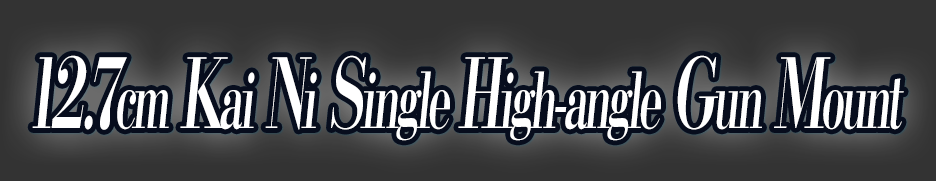
<style>
.page{position:relative;width:936px;height:181px;background:#333333}
.page>*{position:absolute;margin:0}
.t1{font:76.8px "KochoStd-Heavy";letter-spacing:-0.08em;color:#ffffff;font-style:italic;scale:0.57 1}
.t2{font:96px "KochoStd-Heavy";letter-spacing:-0.08em;color:#ffffff;font-style:italic;scale:0.57 1}
</style>
<div class="page">
<p class="t1" style="left:32px;top:55px;width:872px;height:86px"><span class="t2">12.7</span>cm<span class="t2"> K</span>ai<span class="t2"> N</span>i<span class="t2"> S</span>ingle <span class="t2">H</span>igh-angle<span class="t2"> G</span>un<span class="t2"> M</span>ount</p>
</div>
